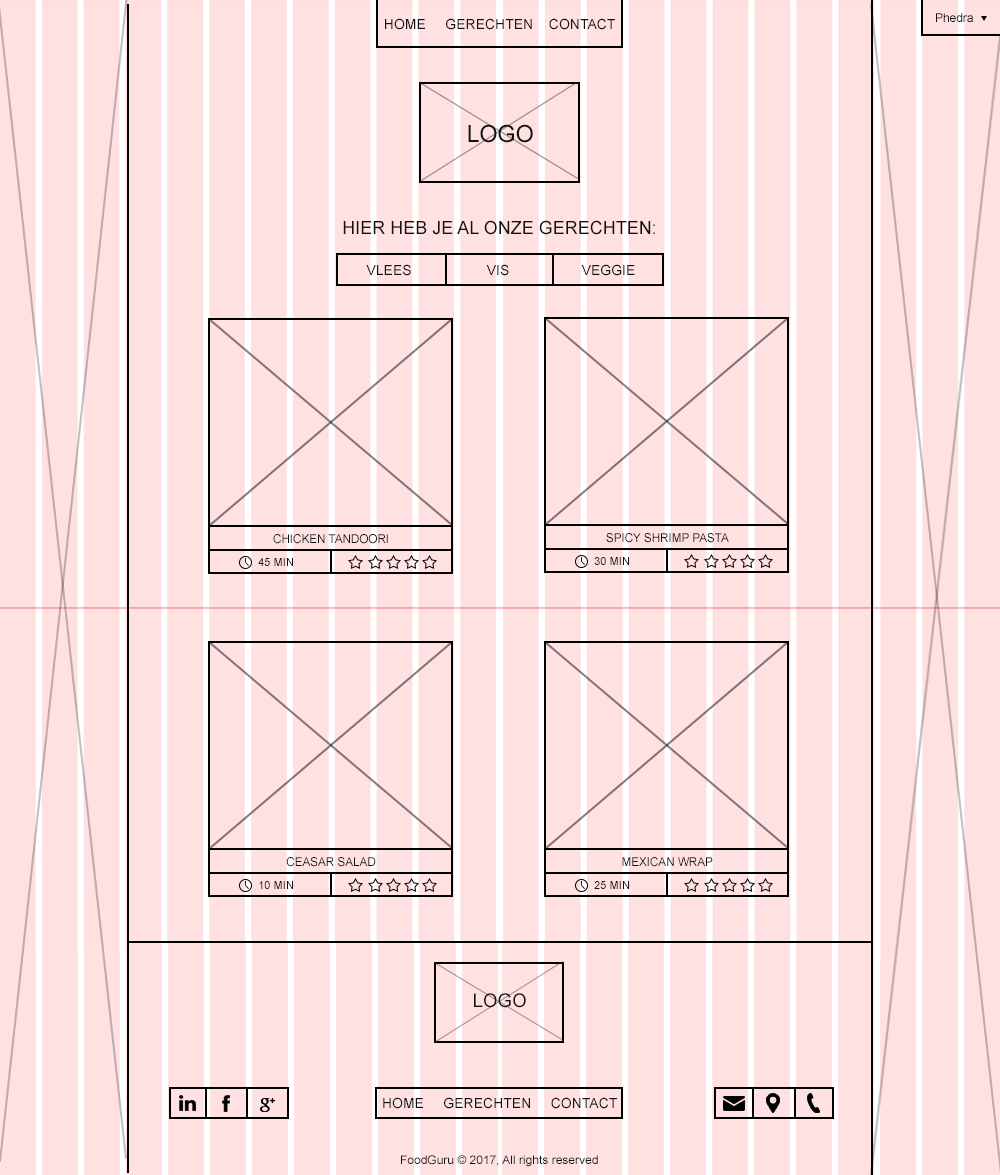
<style>
.page{position:relative;width:1000px;height:1175px;background:#ffe1e1}
.page>*{position:absolute;margin:0}
.t1{font:12px "ArialMT";color:#111111}
.t2{font:14px "ArialMT";color:#111111}
.t3{font:23.5px "ArialMT";color:#111111}
.t4{font:18px "ArialMT";color:#111111}
.t5{font:11px "ArialMT";color:#111111}
</style>
<div class="page">
<p class="t1" style="left:936px;top:13px;width:37px;height:9px">Phedra</p>
<p class="t2" style="left:385px;top:18px;width:230px;height:12px">HOME     GERECHTEN    CONTACT</p>
<p class="t3" style="left:468px;top:124px;width:65px;height:19px">LOGO</p>
<p class="t4" style="left:343px;top:220px;width:312px;height:15px">HIER HEB JE AL ONZE GERECHTEN:</p>
<p class="t2" style="left:366px;top:264px;width:45px;height:12px">VLEES</p>
<p class="t2" style="left:486px;top:264px;width:23px;height:12px">VIS</p>
<p class="t2" style="left:581px;top:264px;width:54px;height:12px">VEGGIE</p>
<p class="t1" style="left:273px;top:534px;width:115px;height:10px">CHICKEN TANDOORI</p>
<p class="t1" style="left:606px;top:533px;width:123px;height:10px">SPICY SHRIMP PASTA</p>
<p class="t5" style="left:258px;top:558px;width:35px;height:8px">45 MIN</p>
<p class="t5" style="left:594px;top:557px;width:35px;height:8px">30 MIN</p>
<p class="t1" style="left:286px;top:857px;width:90px;height:10px">CEASAR SALAD</p>
<p class="t1" style="left:622px;top:857px;width:91px;height:10px">MEXICAN WRAP</p>
<p class="t5" style="left:259px;top:881px;width:34px;height:8px">10 MIN</p>
<p class="t5" style="left:594px;top:881px;width:35px;height:8px">25 MIN</p>
</div>
